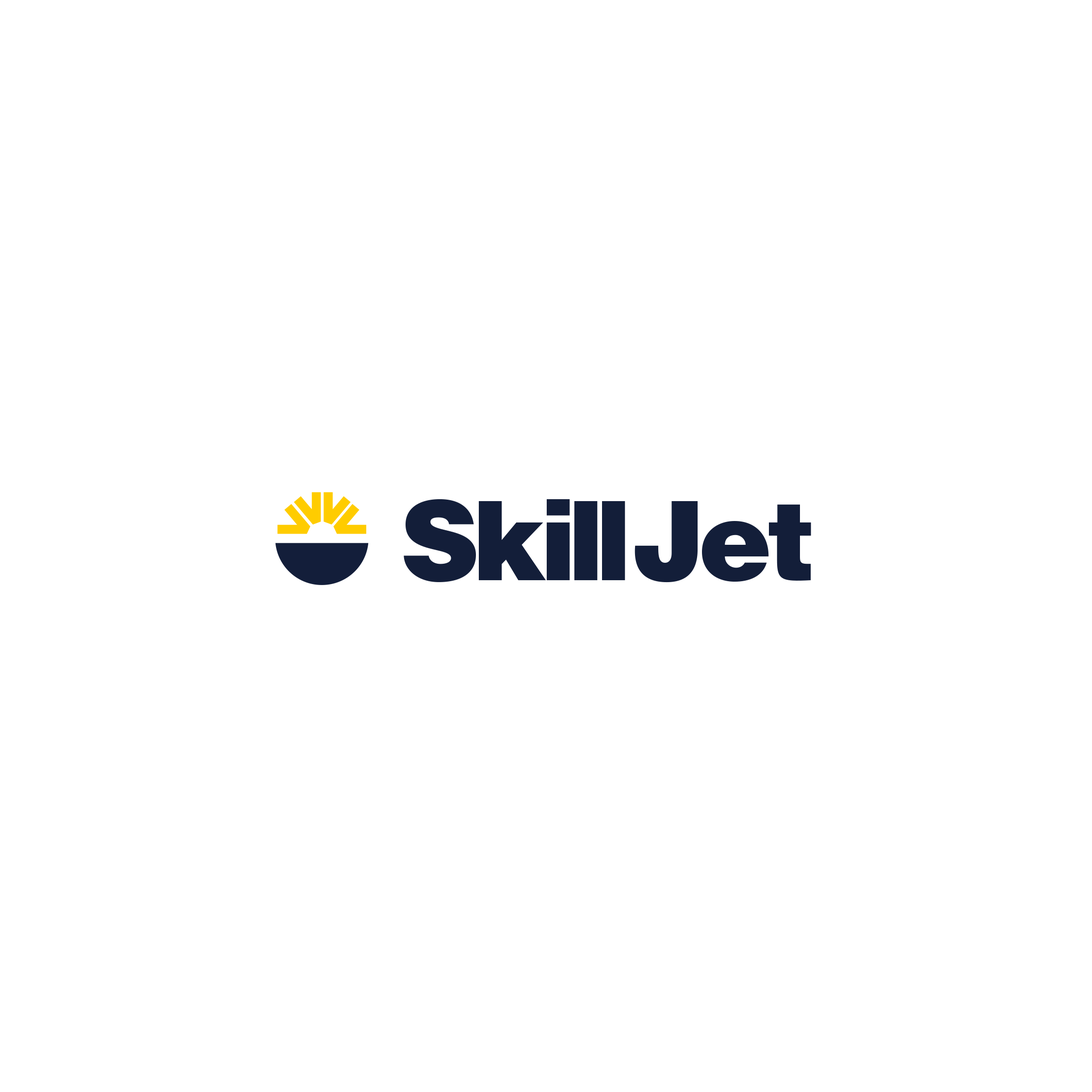
<style>
.page{position:relative;width:1092px;height:1092px;background:#ffffff}
.page>*{position:absolute;margin:0}
.t1{font:109.9px "Helvetica-Black";color:#131e3a}
</style>
<div class="page">
<p class="t1" style="left:404px;top:499px;width:407px;height:84px">SkillJet</p>
</div>
